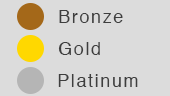
<style>
.page{position:relative;width:170px;height:96px;background:#dcdcdc}
.page>*{position:absolute;margin:0}
.t1{font:18px "Helvetica";letter-spacing:0.09em;color:#3e3e3e}
</style>
<div class="page">
<p class="t1" style="left:59px;top:10px;width:64px;height:13px">Bronze</p>
<p class="t1" style="left:58px;top:42px;width:42px;height:13px">Gold</p>
<p class="t1" style="left:58px;top:74px;width:80px;height:13px">Platinum</p>
</div>
